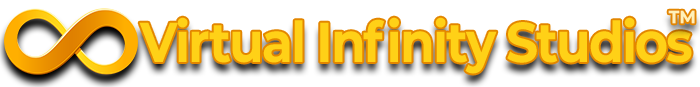
<style>
.page{position:relative;width:700px;height:87px;background:#ffffff}
.page>*{position:absolute;margin:0}
.t1{font:56.2px "Montserrat-Bold";letter-spacing:-0.04em;color:#ffd117;scale:0.9 1}
.t2{font:30.4px "Montserrat-Bold";letter-spacing:-0.04em;color:#fff1b9;scale:0.89 1}
</style>
<div class="page">
<p class="t1" style="left:139px;top:17px;width:553px;height:57px">Virtual Infinity Studios</p>
<p class="t2" style="left:668px;top:10px;width:27px;height:14px">™</p>
</div>
